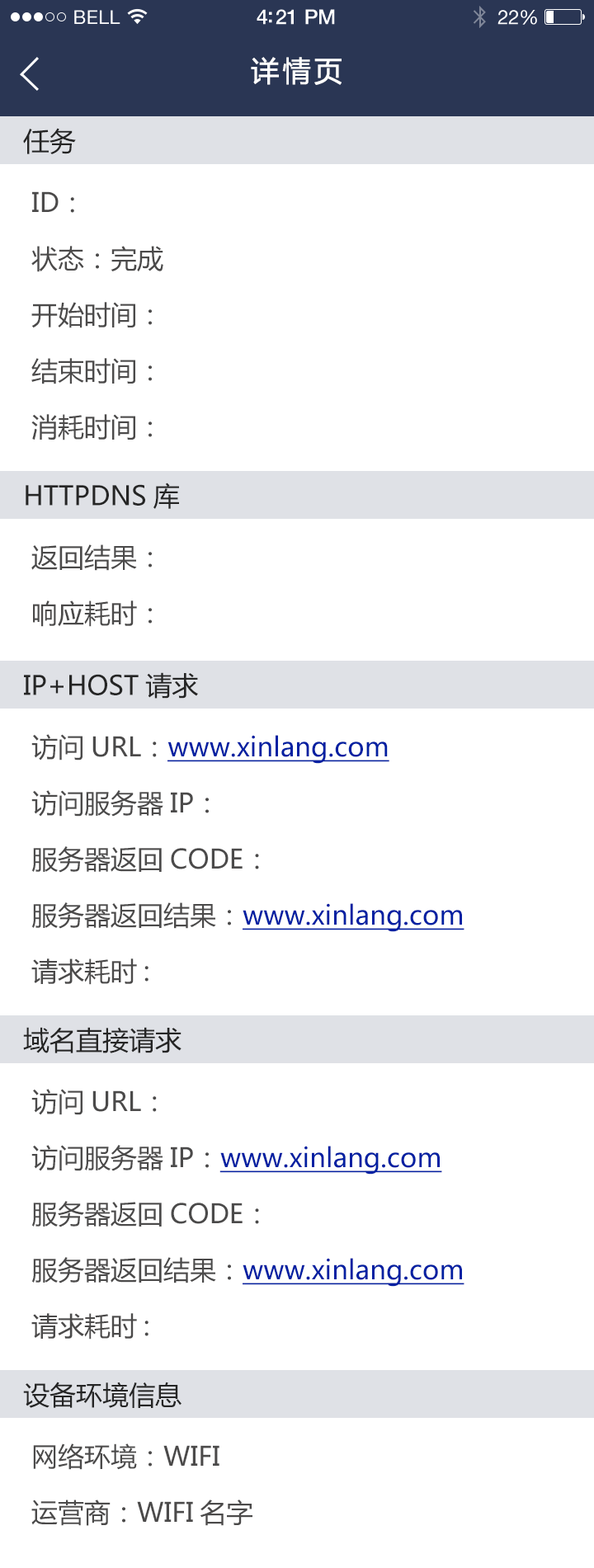
<style>
.page{position:relative;width:594px;height:1568px;background:#ffffff}
.page>*{position:absolute;margin:0}
.t1{font:19px "HelveticaNeue";letter-spacing:0.02em;color:#ffffff}
.t2{font:20.6px "HelveticaNeue-Medium";letter-spacing:-0.02em;color:#ffffff}
.t3{font:19.8px "HelveticaNeue";letter-spacing:-0.02em;color:#ffffff}
.t4{font:28px "MicrosoftYaHei";letter-spacing:0.1em;color:#ffffff;font-weight:bold}
.t5{font:26.4px "MicrosoftYaHei";color:#252525}
.t6{font:26.4px/28px "MicrosoftYaHei";color:#4b4a4a}
.t7{font:26.4px/28px "MicrosoftYaHei";color:#0120a2;text-decoration:underline}
</style>
<div class="page">
<p class="t1" style="left:74px;top:10px;width:46px;height:14px">BELL</p>
<p class="t2" style="left:257px;top:9px;width:78px;height:16px">4:21 PM</p>
<p class="t3" style="left:497px;top:10px;width:40px;height:15px">22%</p>
<p class="t4" style="left:251px;top:57px;width:90px;height:28px">详情页</p>
<p class="t5" style="left:23px;top:128px;width:53px;height:26px">任务</p>
<p class="t6" style="left:31px;top:191px;width:132px;height:249px">ID：<br><br>状态：完成<br><br>开始时间：<br><br>结束时间：<br><br>消耗时间：</p>
<p class="t5" style="left:26px;top:483px;width:153px;height:26px">HTTPDNS库</p>
<p class="t6" style="left:31px;top:544px;width:121px;height:83px">返回结果：<br><br>响应耗时：</p>
<p class="t5" style="left:24px;top:672px;width:174px;height:27px">IP+HOST请求</p>
<p class="t6" style="left:31px;top:734px;width:433px;height:251px">访问URL：<span class="t7">www.xinlang.com<br></span><br>访问服务器IP：<br><br>服务器返回CODE：<br><br>服务器返回结果：<span class="t7">www.xinlang.com<br><br></span>请求耗时:</p>
<p class="t5" style="left:23px;top:1027px;width:158px;height:26px">域名直接请求</p>
<p class="t6" style="left:31px;top:1089px;width:433px;height:251px">访问URL：<br><br>访问服务器IP：<span class="t7">www.xinlang.com<br></span><br>服务器返回CODE：<br><br>服务器返回结果：<span class="t7">www.xinlang.com<br><br></span>请求耗时:</p>
<p class="t5" style="left:23px;top:1382px;width:158px;height:26px">设备环境信息</p>
<p class="t6" style="left:31px;top:1443px;width:221px;height:83px">网络环境：WIFI<br><br>运营商：WIFI名字</p>
</div>
